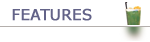
<style>
.page{position:relative;width:150px;height:42px;background:#ffffff}
.page>*{position:absolute;margin:0}
.t1{font:15px "Verdana";color:#636388;font-weight:bold}
</style>
<div class="page">
<p class="t1" style="left:12px;top:8px;width:80px;height:13px">FEATURES</p>
</div>
